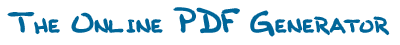
<style>
.page{position:relative;width:400px;height:45px;background:#ffffff}
.page>*{position:absolute;margin:0}
.t1{font:18px "BobbiesHand";color:#006699}
.t2{font:30px "BobbiesHand";color:#006699}
</style>
<div class="page">
<p class="t1" style="left:8px;top:8px;width:381px;height:28px"><span class="t2">T</span>HE <span class="t2">O</span>NLINE <span class="t2">PDF G</span>ENERATOR</p>
</div>
